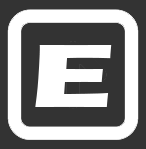
<style>
.page{position:relative;width:146px;height:149px;background:#333333}
.page>*{position:absolute;margin:0}
.t1{font:93.1px "ErasITC-Bold";color:#ffffff;scale:1.41 1}
</style>
<div class="page">
<p class="t1" style="left:35px;top:45px;width:77px;height:62px">E</p>
</div>
